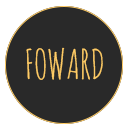
<style>
.page{position:relative;width:128px;height:128px;background:#292929}
.page>*{position:absolute;margin:0}
.t1{font:40px "AmaticSC-Regular";color:#ffcc66}
</style>
<div class="page">
<p class="t1" style="left:26px;top:47px;width:77px;height:33px">FOWARD</p>
</div>
